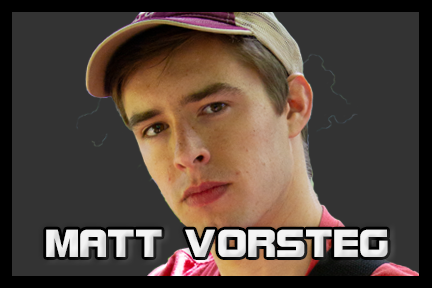
<style>
.page{position:relative;width:432px;height:288px;background:#333333}
.page>*{position:absolute;margin:0}
.t1{font:41.7px "BolsterBold";color:#f3f3f3}
</style>
<div class="page">
<p class="t1" style="left:46px;top:229px;width:342px;height:28px">MATT VORSTEG</p>
</div>
